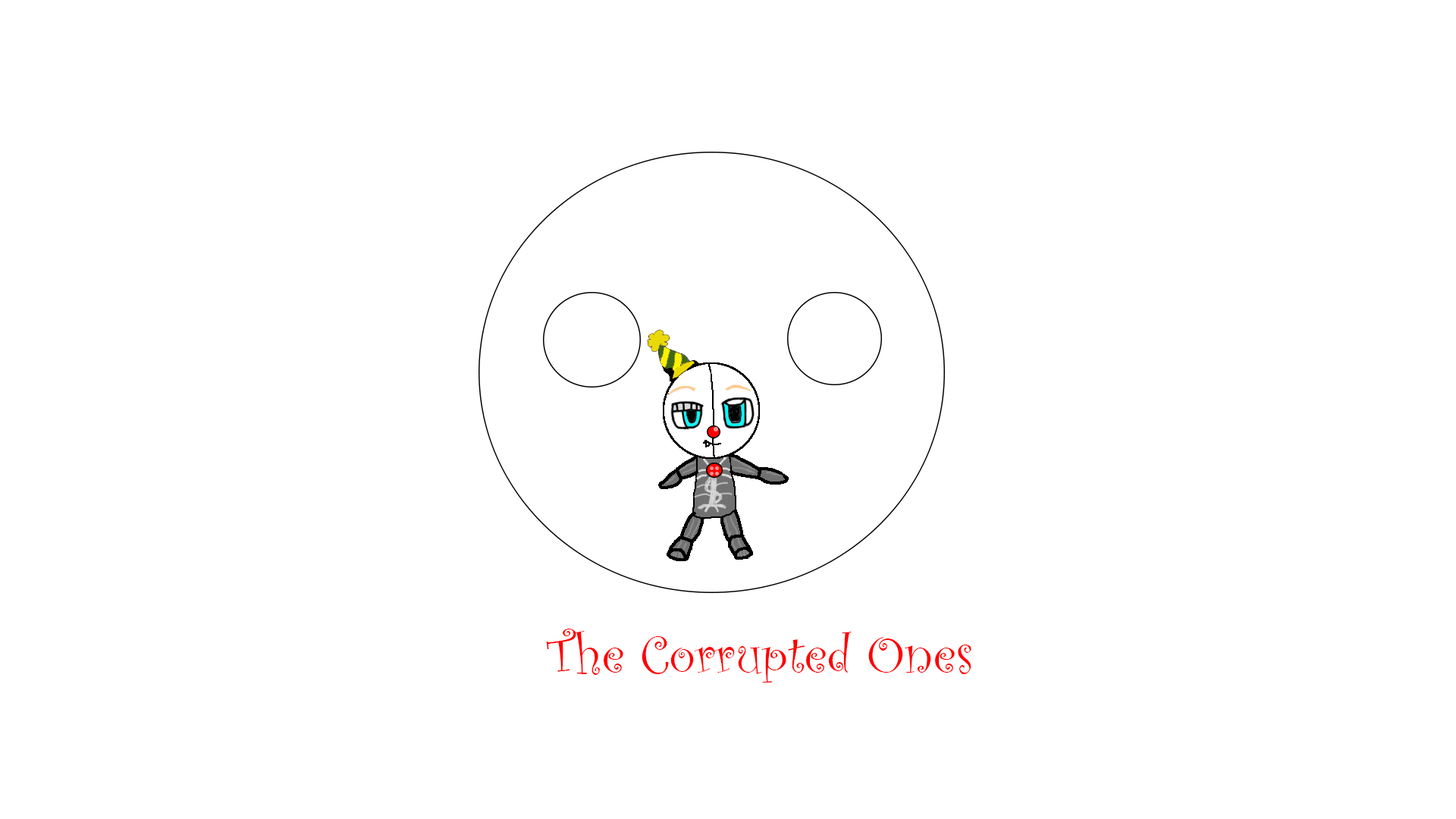
<style>
.page{position:relative;width:1456px;height:819px;background:#ffffff}
.page>*{position:absolute;margin:0}
.t1{font:54.6px "CurlzMT";color:#ff0000}
</style>
<div class="page">
<p class="t1" style="left:546px;top:629px;width:425px;height:53px">The Corrupted Ones</p>
</div>
